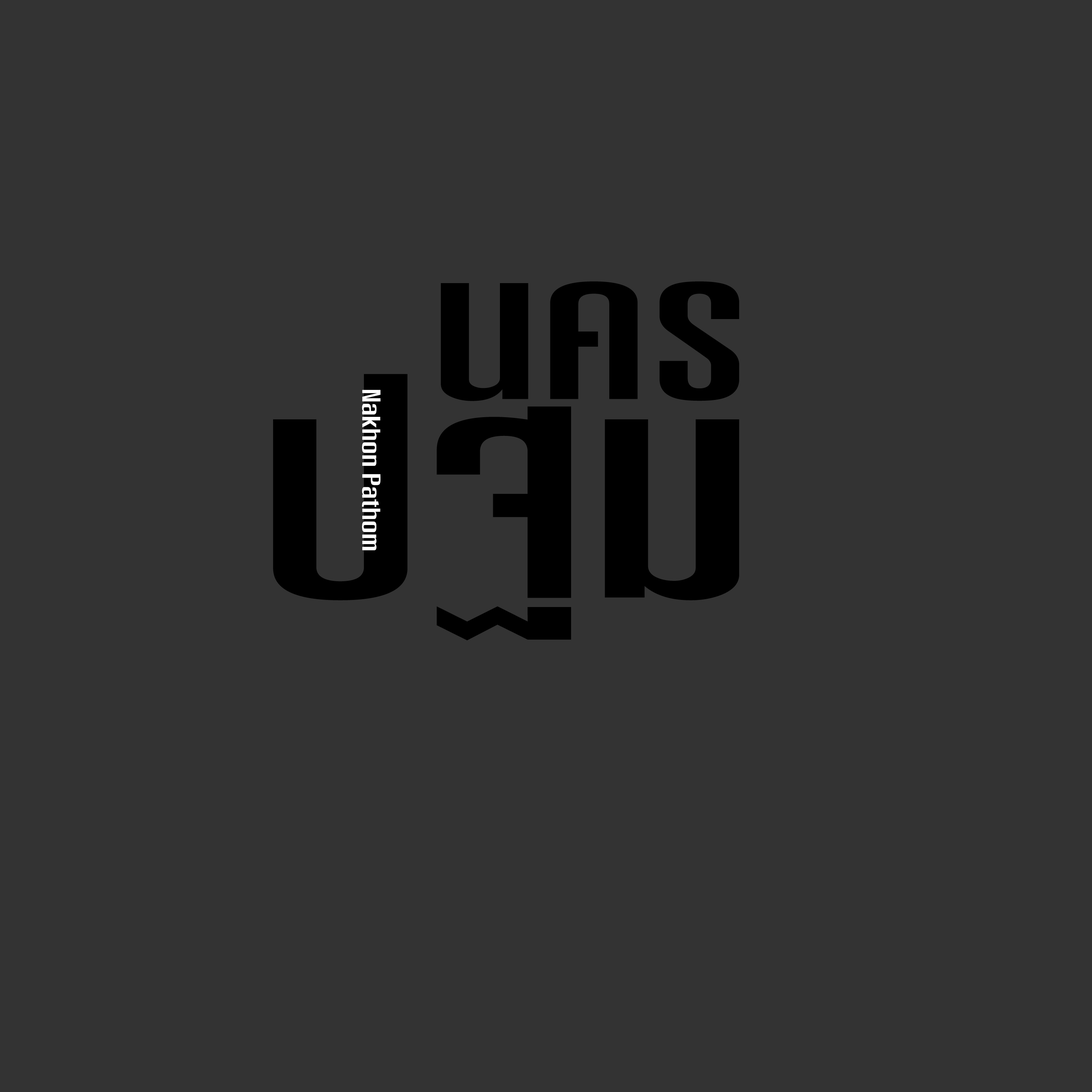
<style>
.page{position:relative;width:1092px;height:1092px;background:#333333}
.page>*{position:absolute;margin:0}
.t1{font:202.8px "DSNPatPongExtend";letter-spacing:0.02em;color:#000000}
.t2{font:312.1px "DSNPatPongExtend";letter-spacing:0.02em;color:#000000}
.t3{font:24.2px "DSNPatPongExtend";letter-spacing:0.02em;color:#ffffff}
</style>
<div class="page">
<p class="t1" style="left:441px;top:281px;width:298px;height:120px">นคร</p>
<p class="t2" style="left:273px;top:374px;width:466px;height:266px">ปฐม</p>
<p class="t3" style="left:362px;top:390px;width:18px;height:160px;rotate:90deg">Nakhon Pathom</p>
</div>
